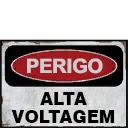
<style>
.page{position:relative;width:128px;height:128px;background:#ffffff}
.page>*{position:absolute;margin:0}
.t1{font:20px "MHeiPRC-Xbold";letter-spacing:-0.04em;color:#cecbce}
.t2{font:17.5px/17.9px "Swiss721BT-Black";color:#000000}
</style>
<div class="page">
<p class="t1" style="left:27px;top:58px;width:76px;height:16px">PERIGO</p>
<p class="t2" style="left:11px;top:92px;width:104px;height:31px;text-align:center">ALTA<br>VOLTAGEM</p>
</div>
